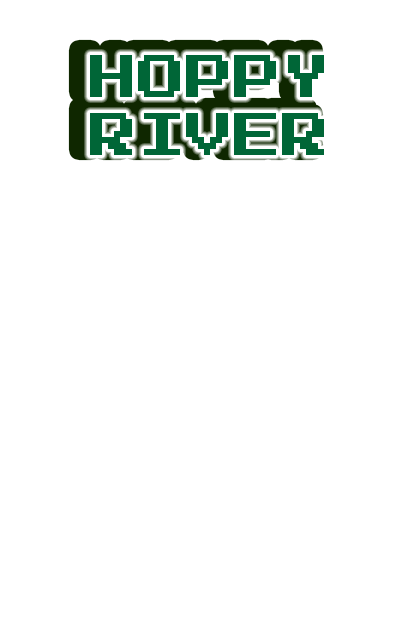
<style>
.page{position:relative;width:400px;height:640px;background:#ffffff}
.page>*{position:absolute;margin:0}
.t1{font:48px "PressStartK";color:#006637}
</style>
<div class="page">
<p class="t1" style="left:90px;top:55px;width:234px;height:100px;text-align:center">HOPPY<br>RIVER</p>
</div>
